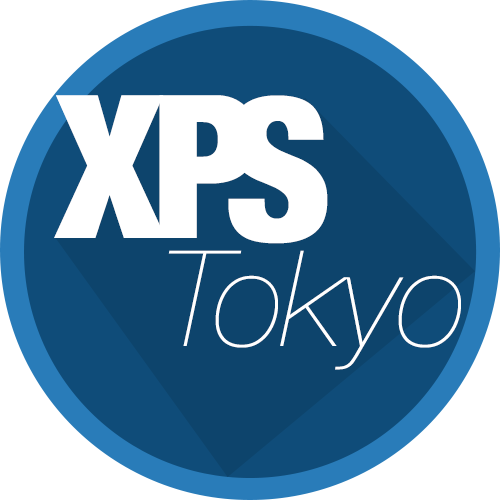
<style>
.page{position:relative;width:500px;height:500px;background:#ffffff}
.page>*{position:absolute;margin:0}
.t1{font:200px "HelveticaNeue-CondensedBlack";color:#ffffff}
.t2{font:133.3px "HelveticaNeue-UltraLightItalic";color:#ffffff}
</style>
<div class="page">
<p class="t1" style="left:54px;top:95px;width:112px;height:143px">X</p>
<p class="t1" style="left:159px;top:95px;width:98px;height:143px">P</p>
<p class="t1" style="left:228px;top:95px;width:100px;height:149px">S</p>
<p class="t2" style="left:168px;top:250px;width:293px;height:120px">Tokyo</p>
</div>
